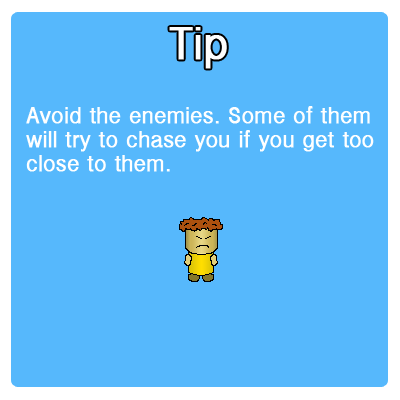
<style>
.page{position:relative;width:400px;height:400px;background:#56b8fc}
.page>*{position:absolute;margin:0}
.t1{font:24px/24px "InaiMathi";color:#ffffff;font-weight:bold}
</style>
<div class="page">
<p class="t1" style="left:26px;top:106px;width:348px;height:66px">Avoid the enemies. Some of them will try to chase you if you get too<br>close to them.</p>
</div>
